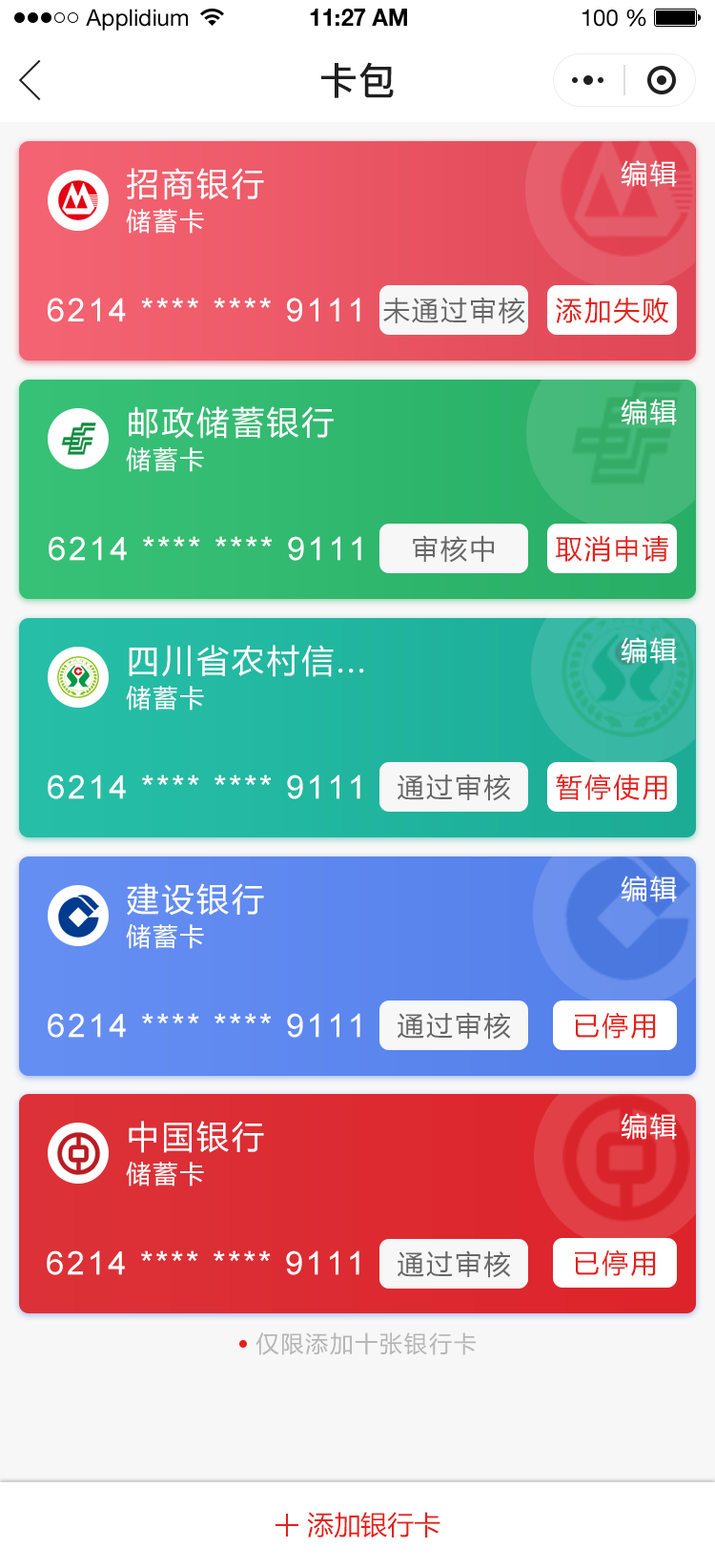
<style>
.page{position:relative;width:715px;height:1568px}
.page>*{position:absolute;margin:0}
.t1{font:22.9px "HelveticaNeueLTStd-Roman";color:#000000}
.t2{font:22.9px "HelveticaNeueLTStd-Bd";color:#000000}
.t3{font:38.2px "PingFang-SC-Bold";color:#202020;text-transform:uppercase}
.t4{font:26.7px "MicrosoftYaHei";letter-spacing:0.08em;color:#ffffff}
.t5{font:32.4px "MicrosoftYaHei";letter-spacing:0.08em;color:#ffffff}
.t6{font:24.8px "MicrosoftYaHei";letter-spacing:0.08em;color:#ffffff}
.t7{font:32.4px "ArialMT";letter-spacing:0.08em;color:#ffffff}
.t8{font:26.7px "MicrosoftYaHei";letter-spacing:0.08em;color:#666666}
.t9{font:26.7px "MicrosoftYaHei";letter-spacing:0.08em;color:#e61f18}
.t10{font:22.9px "MicrosoftYaHei";letter-spacing:0.08em;color:#b6b6b6}
.t11{font:26.7px "MicrosoftYaHei";color:#e61f18;text-transform:uppercase}
</style>
<div class="page">
<p class="t1" style="left:86px;top:9px;width:102px;height:22px">Applidium</p>
<p class="t2" style="left:310px;top:9px;width:97px;height:17px">11:27 AM</p>
<p class="t1" style="left:583px;top:9px;width:64px;height:18px">100 %</p>
<p class="t3" style="left:321px;top:62px;width:73px;height:36px">卡包</p>
<p class="t4" style="left:621px;top:160px;width:56px;height:27px">编辑</p>
<p class="t5" style="left:127px;top:168px;width:137px;height:32px">招商银行</p>
<p class="t6" style="left:126px;top:209px;width:78px;height:25px">储蓄卡</p>
<p class="t7" style="left:48px;top:298px;width:313px;height:24px">6214 **** **** 9111</p>
<p class="t8" style="left:383px;top:297px;width:143px;height:27px">未通过审核</p>
<p class="t9" style="left:556px;top:298px;width:114px;height:26px">添加失败</p>
<p class="t4" style="left:621px;top:399px;width:56px;height:26px">编辑</p>
<p class="t5" style="left:129px;top:406px;width:205px;height:33px">邮政储蓄银行</p>
<p class="t6" style="left:126px;top:447px;width:78px;height:25px">储蓄卡</p>
<p class="t7" style="left:49px;top:536px;width:312px;height:25px">6214 **** **** 9111</p>
<p class="t8" style="left:413px;top:535px;width:81px;height:28px">审核中</p>
<p class="t9" style="left:556px;top:535px;width:113px;height:27px">取消申请</p>
<p class="t4" style="left:621px;top:637px;width:56px;height:27px">编辑</p>
<p class="t5" style="left:129px;top:645px;width:235px;height:32px">四川省农村信...</p>
<p class="t6" style="left:126px;top:686px;width:78px;height:25px">储蓄卡</p>
<p class="t8" style="left:398px;top:774px;width:113px;height:27px">通过审核</p>
<p class="t9" style="left:556px;top:774px;width:112px;height:26px">暂停使用</p>
<p class="t7" style="left:48px;top:774px;width:313px;height:25px">6214 **** **** 9111</p>
<p class="t4" style="left:621px;top:876px;width:56px;height:26px">编辑</p>
<p class="t5" style="left:127px;top:883px;width:137px;height:33px">建设银行</p>
<p class="t6" style="left:126px;top:924px;width:78px;height:25px">储蓄卡</p>
<p class="t7" style="left:48px;top:1013px;width:313px;height:25px">6214 **** **** 9111</p>
<p class="t8" style="left:398px;top:1012px;width:113px;height:28px">通过审核</p>
<p class="t9" style="left:575px;top:1012px;width:81px;height:27px">已停用</p>
<p class="t5" style="left:129px;top:1121px;width:135px;height:32px">中国银行</p>
<p class="t4" style="left:621px;top:1113px;width:56px;height:27px">编辑</p>
<p class="t6" style="left:126px;top:1162px;width:78px;height:24px">储蓄卡</p>
<p class="t7" style="left:47px;top:1250px;width:313px;height:25px">6214 **** **** 9111</p>
<p class="t8" style="left:398px;top:1250px;width:113px;height:28px">通过审核</p>
<p class="t9" style="left:575px;top:1249px;width:81px;height:27px">已停用</p>
<p class="t10" style="left:256px;top:1332px;width:220px;height:23px">仅限添加十张银行卡</p>
<p class="t11" style="left:307px;top:1512px;width:134px;height:26px">添加银行卡</p>
</div>
